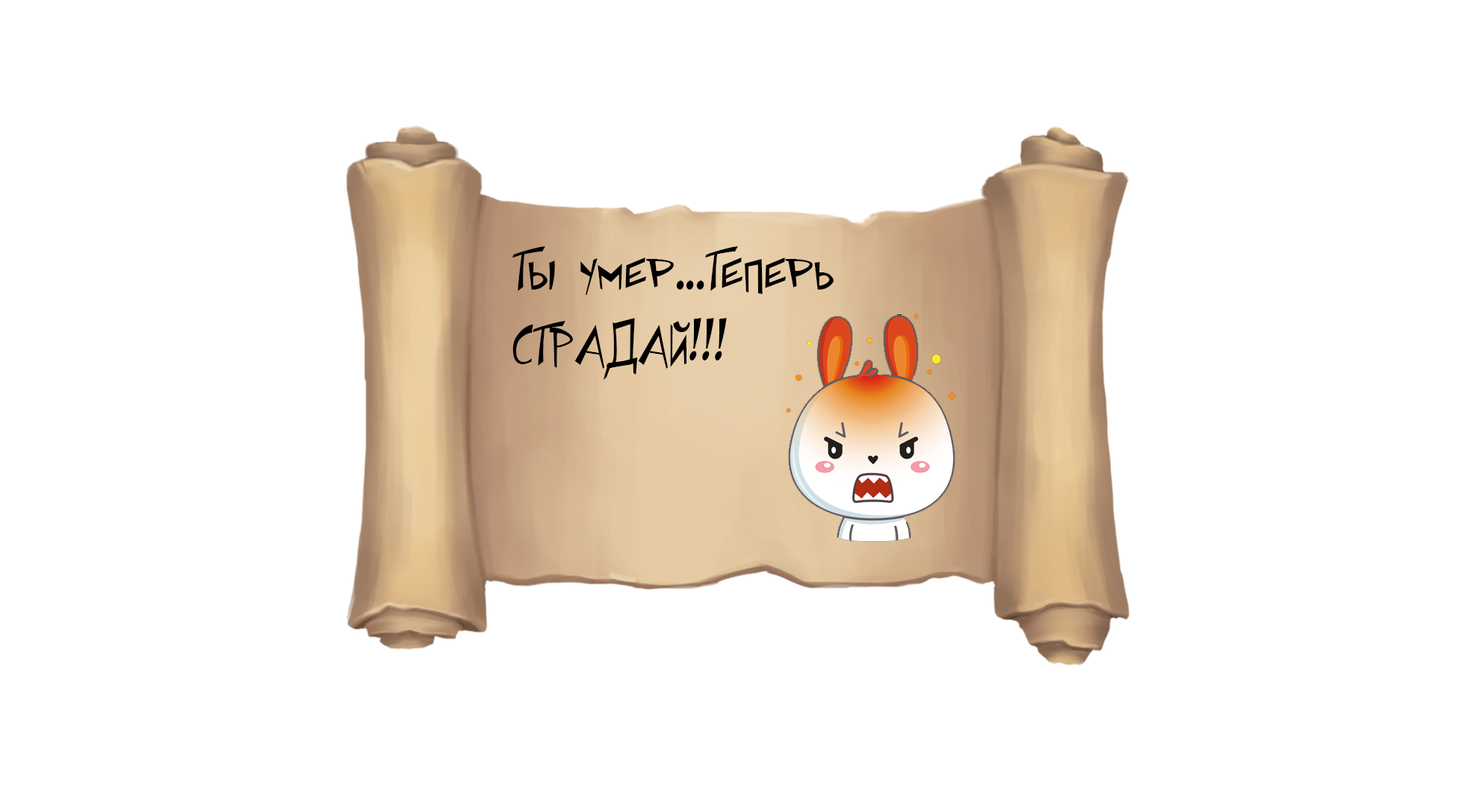
<style>
.page{position:relative;width:1479px;height:806px;background:#ffffff}
.page>*{position:absolute;margin:0}
.t1{font:62.2px "SpaceToasterCYR-Regular";color:#000000}
</style>
<div class="page">
<p class="t1" style="left:512px;top:246px;width:321px;height:134px">Ты умер...Теперь СТРАДАЙ!!!</p>
</div>
